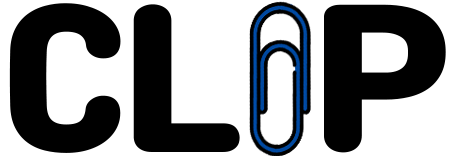
<style>
.page{position:relative;width:456px;height:156px;background:#ffffff}
.page>*{position:absolute;margin:0}
.t1{font:187.5px "Cafe24Ssurround";letter-spacing:-0.04em;color:#000000;font-weight:bold}
</style>
<div class="page">
<p class="t1" style="left:9px;top:3px;width:437px;height:150px">CL  P</p>
</div>
